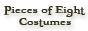
<style>
.page{position:relative;width:88px;height:31px;background:#ffffff}
.page>*{position:absolute;margin:0}
.t1{font:14px "Freebooter";color:#36331c;scale:1.2 1}
</style>
<div class="page">
<p class="t1" style="left:3px;top:6px;width:82px;height:11px">Pieces of Eight</p>
<p class="t1" style="left:19px;top:18px;width:52px;height:9px">Costumes</p>
</div>
